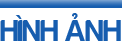
<style>
.page{position:relative;width:122px;height:47px;background:#ffffff}
.page>*{position:absolute;margin:0}
.t1{font:30.6px "FS-Harabara";color:#165daf}
</style>
<div class="page">
<p class="t1" style="left:0px;top:13px;width:121px;height:28px">HÌNH ẢNH</p>
</div>
